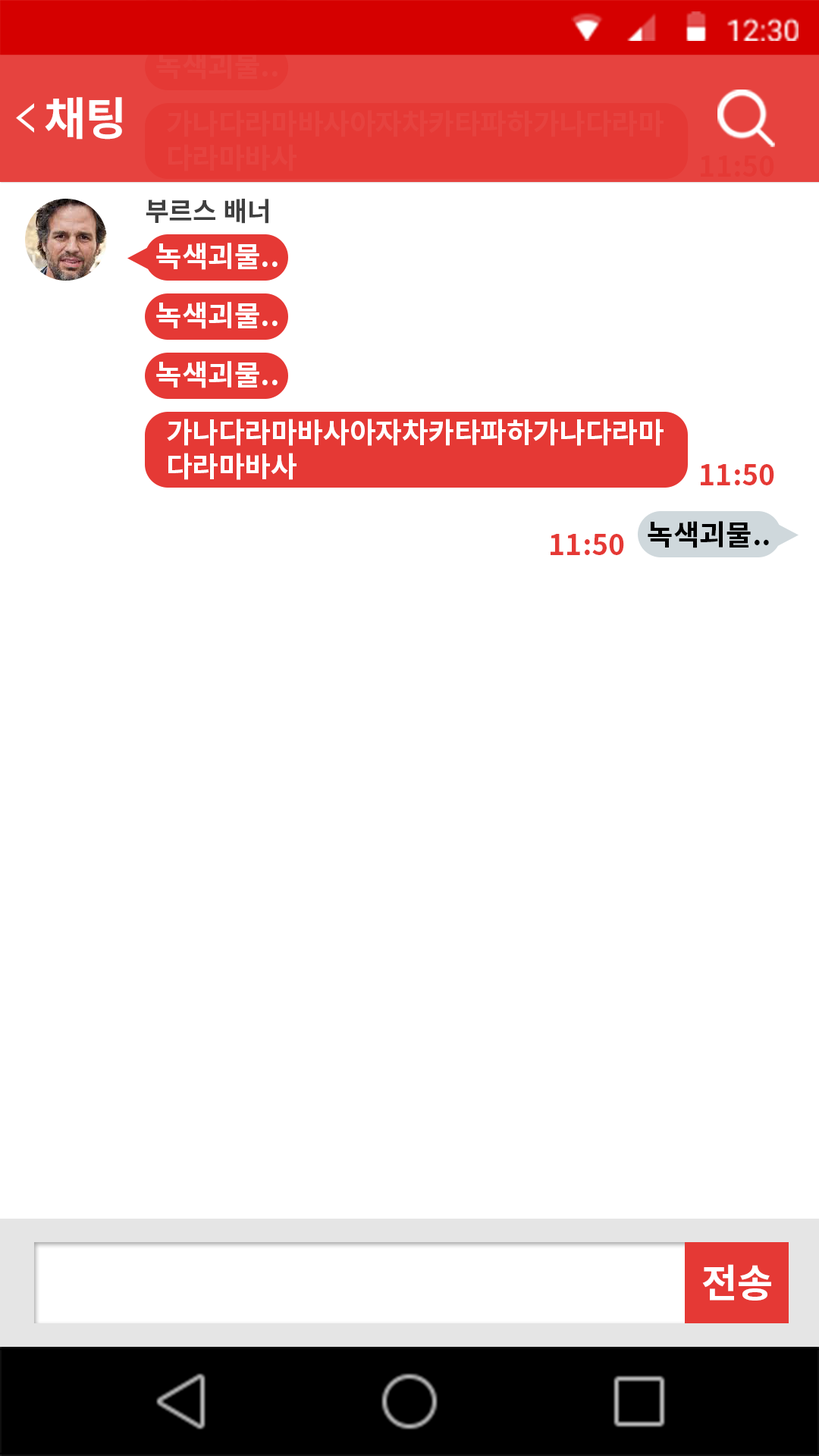
<style>
.page{position:relative;width:819px;height:1456px;background:#ffffff}
.page>*{position:absolute;margin:0}
.t1{font:28.5px "NotoSansCJKkr-Bold";color:#e6433f}
.t2{font:45.2px "NotoSansCJKkr-Bold";letter-spacing:0.005em;color:#ffffff}
.t3{font:28.5px "NotoSansCJKkr-Bold";color:#e53935}
.t4{font:26.2px "NotoSansCJKkr-Bold";color:#3f3f3f}
.t5{font:28.5px "NotoSansCJKkr-Bold";color:#ffffff}
.t6{font:28.5px "NotoSansCJKkr-Bold";color:#000000}
.t7{font:39.3px "NotoSansCJKkr-Bold";color:#ffffff}
</style>
<div class="page">
<p class="t1" style="left:156px;top:52px;width:122px;height:28px">녹색괴물..</p>
<p class="t2" style="left:45px;top:97px;width:77px;height:43px">채팅</p>
<p class="t1" style="left:167px;top:110px;width:497px;height:61px">가나다라마바사아자차카타파하가나다라마<br>다라마바사</p>
<p class="t3" style="left:701px;top:155px;width:73px;height:22px">11:50</p>
<p class="t4" style="left:146px;top:199px;width:122px;height:25px">부르스 배너</p>
<p class="t5" style="left:156px;top:243px;width:122px;height:27px">녹색괴물..</p>
<p class="t5" style="left:156px;top:302px;width:122px;height:27px">녹색괴물..</p>
<p class="t5" style="left:156px;top:361px;width:122px;height:27px">녹색괴물..</p>
<p class="t5" style="left:167px;top:419px;width:497px;height:61px">가나다라마바사아자차카타파하가나다라마<br>다라마바사</p>
<p class="t3" style="left:701px;top:464px;width:73px;height:21px">11:50</p>
<p class="t6" style="left:648px;top:521px;width:121px;height:27px">녹색괴물..</p>
<p class="t3" style="left:551px;top:534px;width:73px;height:21px">11:50</p>
<p class="t7" style="left:702px;top:1264px;width:69px;height:37px">전송</p>
</div>
